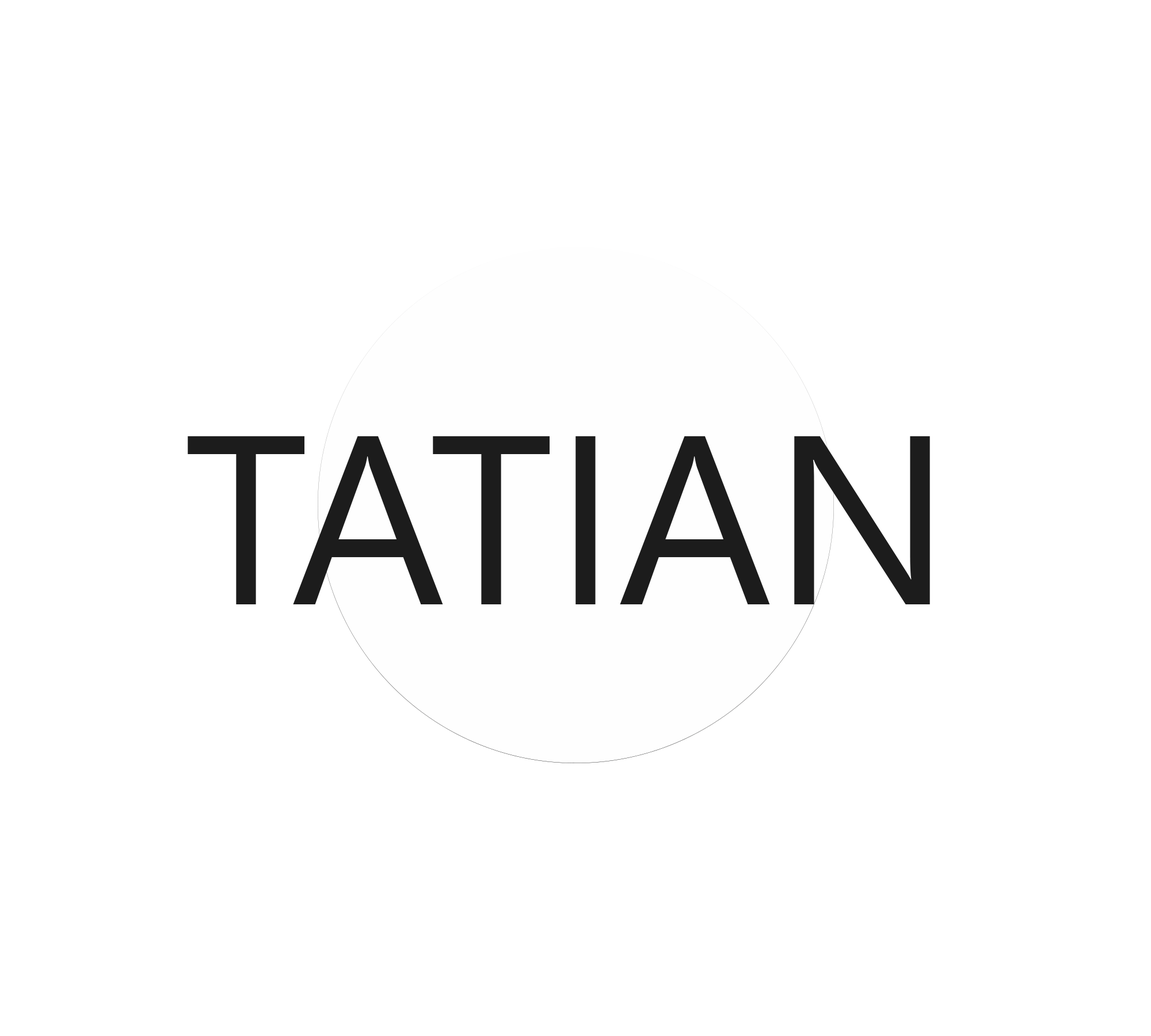
<style>
.page{position:relative;width:1151px;height:1036px;background:#ffffff}
.page>*{position:absolute;margin:0}
.t1{font:239.8px "Leelawadee";color:#1c1c1c}
</style>
<div class="page">
<p class="t1" style="left:188px;top:436px;width:742px;height:168px">TATIAN</p>
</div>
